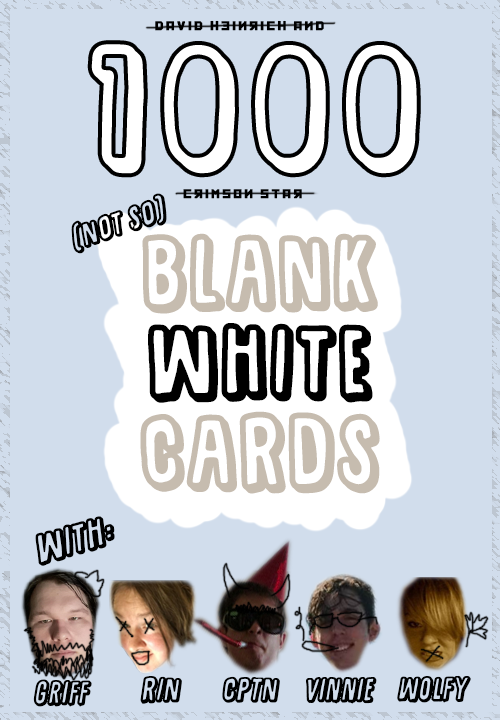
<style>
.page{position:relative;width:500px;height:720px;background:#d1ddec}
.page>*{position:absolute;margin:0}
.t1{font:12px "Kremlin";letter-spacing:0.2em;color:#000000;font-weight:bold}
.t2{font:24px "SugarpunchDEMO";color:#000000;font-weight:bold;font-style:italic}
.t3{font:72px/90px "SugarpunchDEMO";letter-spacing:0.075em;font-weight:bold}
.t4{font:30px "SugarpunchDEMO";color:#000000;font-weight:bold;font-style:italic}
</style>
<div class="page">
<p class="t1" style="left:155px;top:20px;width:169px;height:11px">david heinrich and</p>
<p class="t2" style="left:71px;top:193px;width:96px;height:61px;rotate:-19deg">(NOT SO)</p>
<p class="t1" style="left:183px;top:189px;width:119px;height:10px">crimson star</p>
<p class="t3" style="left:140px;top:233px;width:240px;height:261px;text-align:center">BLANK<br>WHITE<br>CARDS</p>
<p class="t4" style="left:35px;top:516px;width:80px;height:50px;rotate:-15deg">WITH:</p>
<p class="t2" style="left:140px;top:676px;width:42px;height:28px">RIN</p>
<p class="t2" style="left:222px;top:676px;width:58px;height:27px">CPTN</p>
<p class="t2" style="left:306px;top:677px;width:71px;height:27px">vinnie</p>
<p class="t2" style="left:397px;top:675px;width:74px;height:28px">wolfy</p>
<p class="t2" style="left:33px;top:679px;width:59px;height:28px">griff</p>
</div>
